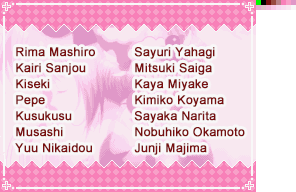
<style>
.page{position:relative;width:296px;height:192px}
.page>*{position:absolute;margin:0}
.t1{font:12px/16px "ArialMT";letter-spacing:0.015em;color:#781010;font-weight:bold}
</style>
<div class="page">
<p class="t1" style="left:15px;top:47px;width:80px;height:106px">Rima Mashiro<br>Kairi Sanjou<br>Kiseki<br>Pepe<br>Kusukusu<br>Musashi<br>Yuu Nikaidou</p>
<p class="t1" style="left:134px;top:47px;width:111px;height:108px">Sayuri Yahagi<br>Mitsuki Saiga<br>Kaya Miyake <br>Kimiko Koyama<br>Sayaka Narita<br>Nobuhiko Okamoto<br>Junji Majima</p>
</div>
